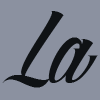
<style>
.page{position:relative;width:100px;height:100px;background:#8b91a0}
.page>*{position:absolute;margin:0}
.t1{font:88.4px "AngillaTattooPersonalUse";letter-spacing:0.025em;color:#0f1215}
</style>
<div class="page">
<p class="t1" style="left:2px;top:11px;width:96px;height:77px">La</p>
</div>
